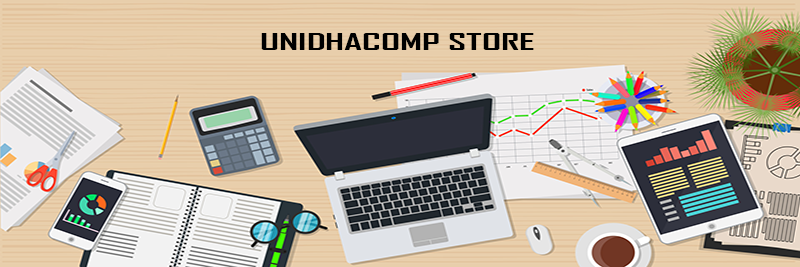
<style>
.page{position:relative;width:800px;height:267px}
.page>*{position:absolute;margin:0}
.t1{font:21.7px "AgencyFB-Bold";color:#000000;scale:1.84 1}
</style>
<div class="page">
<p class="t1" style="left:261px;top:33px;width:273px;height:17px">UNIDHACOMP STORE</p>
</div>
